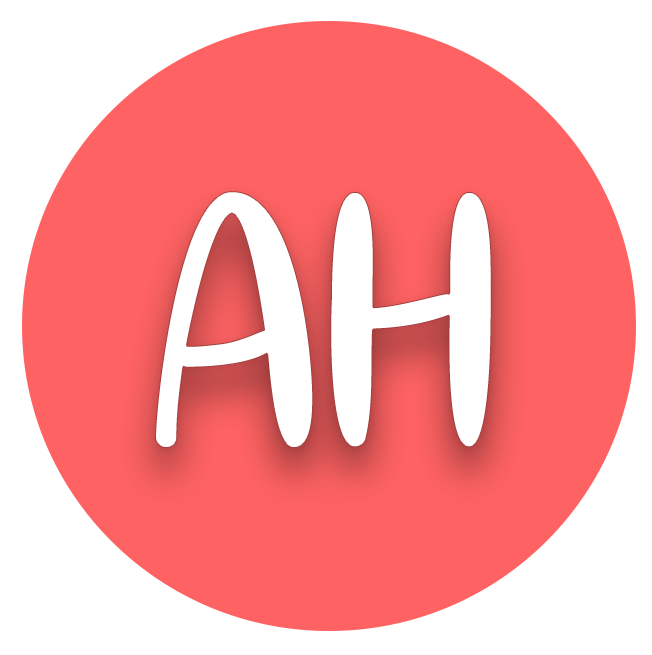
<style>
.page{position:relative;width:652px;height:655px;background:#ff6262}
.page>*{position:absolute;margin:0}
.t1{font:367.2px "CloudCalligraphy";color:#ffffff}
</style>
<div class="page">
<p class="t1" style="left:155px;top:191px;width:337px;height:257px">AH</p>
</div>
